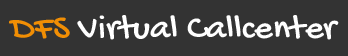
<style>
.page{position:relative;width:348px;height:56px;background:#333333}
.page>*{position:absolute;margin:0}
.t1{font:36px "GochiHand-Regular";color:#ffffff}
.t2{font:36px "GochiHand-Regular";color:#f18e04}
</style>
<div class="page">
<p class="t1" style="left:9px;top:15px;width:330px;height:25px"><span class="t2">DFS </span>Virtual Callcenter</p>
</div>
